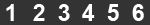
<style>
.page{position:relative;width:150px;height:25px;background:#333333}
.page>*{position:absolute;margin:0}
.t1{font:23.3px "Arial-BoldMT";color:#ffffff}
</style>
<div class="page">
<p class="t1" style="left:6px;top:4px;width:8px;height:17px">1</p>
<p class="t1" style="left:33px;top:4px;width:12px;height:17px">2</p>
<p class="t1" style="left:58px;top:4px;width:12px;height:17px">3</p>
<p class="t1" style="left:82px;top:4px;width:13px;height:17px">4</p>
<p class="t1" style="left:107px;top:4px;width:12px;height:17px">5</p>
<p class="t1" style="left:132px;top:4px;width:12px;height:17px">6</p>
</div>
